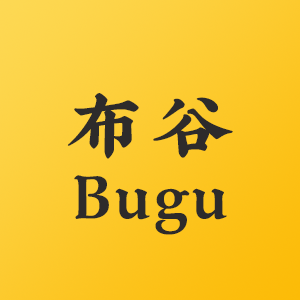
<style>
.page{position:relative;width:300px;height:300px}
.page>*{position:absolute;margin:0}
.t1{font:72px/70px "XiQuezhaopaiti-Regular";letter-spacing:0.025em;color:#2d2b2b}
.t2{font:80px/70px "XiQuezhaopaiti-Regular";letter-spacing:0.075em;color:#2d2b2b}
</style>
<div class="page">
<p class="t1" style="left:67px;top:93px;width:166px;height:142px"><span class="t2">布谷<br> </span>Bugu</p>
</div>
